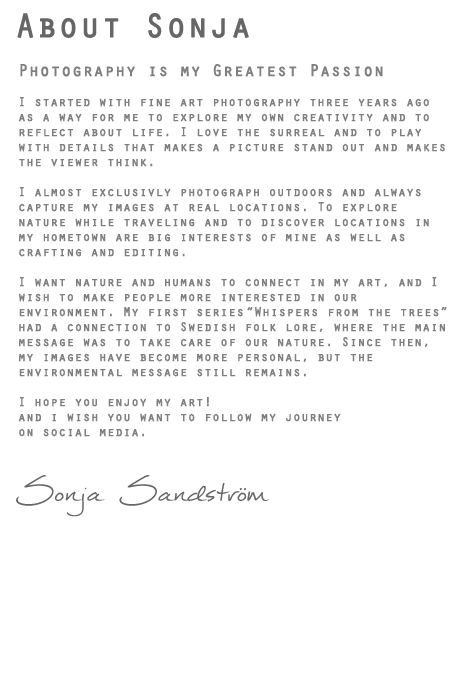
<style>
.page{position:relative;width:450px;height:700px;background:#ffffff}
.page>*{position:absolute;margin:0}
.t1{font:33.3px "Orator-Regular";color:#666666;font-weight:bold}
.t2{font:12.5px "Orator-Regular";color:#7f7f7f;font-weight:bold}
.t3{font:16.7px "Orator-Regular";color:#7f7f7f;font-weight:bold}
.t4{font:58.3px "Mathilde";color:#666666;font-style:italic}
</style>
<div class="page">
<p class="t1" style="left:17px;top:13px;width:232px;height:25px">About Sonja</p>
<p class="t2" style="left:18px;top:64px;width:429px;height:373px;text-align:right"><span class="t3">Photography is my Greatest Passion</span><br><br>I started with fine art photography three years ago<br>as a way for me to explore my own creativity and to<br>reflect about life. I love the surreal and to play<br>with details that makes a picture stand out and makes<br>the viewer think.<br><br>I almost exclusivly photograph outdoors and always <br>capture my images at real locations. To explore<br>nature while traveling and to discover locations in<br>my hometown are big interests of mine as well as<br>crafting and editing.<br><br>I want nature and humans to connect in my art, and I <br>wish to make people more interested in our <br>environment. My first series “Whispers from the trees”<br>had a connection to Swedish folk lore, where the main<br>message was to take care of our nature. Since then,<br>my images have become more personal, but the <br>environmental message still remains.<br><br>I hope you enjoy my art!<br>and i wish you want to follow my journey <br>on social media.</p>
<p class="t4" style="left:16px;top:475px;width:253px;height:42px">Sonja Sandström</p>
</div>
